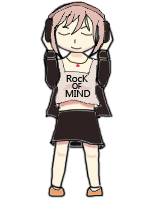
<style>
.page{position:relative;width:150px;height:200px;background:#ffffff}
.page>*{position:absolute;margin:0}
.t1{font:9.7px "Ebrima";color:#000000}
.t2{font:7.8px "Ebrima";color:#000000}
</style>
<div class="page">
<p class="t1" style="left:66px;top:75px;width:22px;height:7px">RocK</p>
<p class="t2" style="left:72px;top:83px;width:10px;height:6px">OF</p>
<p class="t1" style="left:65px;top:90px;width:26px;height:7px">MIND</p>
</div>
